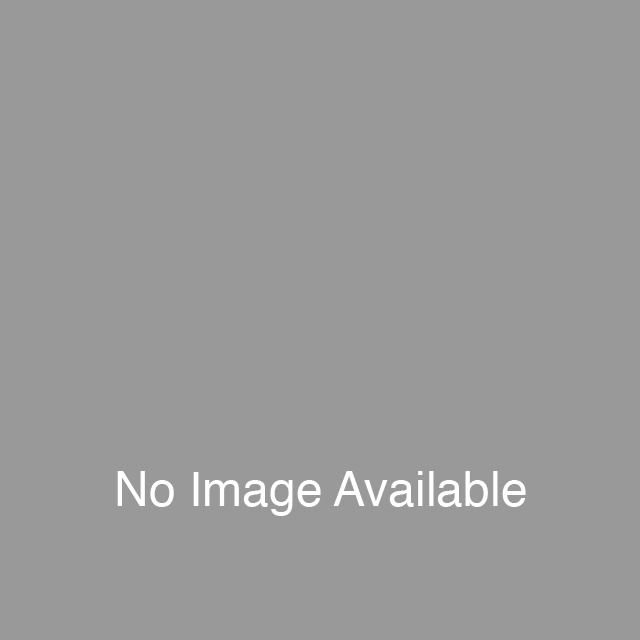
<style>
.page{position:relative;width:640px;height:640px;background:#999999}
.page>*{position:absolute;margin:0}
.t1{font:48px "Helvetica";color:#ffffff}
</style>
<div class="page">
<p class="t1" style="left:117px;top:471px;width:409px;height:45px">No Image Available</p>
</div>
